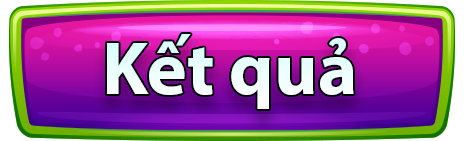
<style>
.page{position:relative;width:465px;height:141px}
.page>*{position:absolute;margin:0}
.t1{font:75px "MyriadPro-Bold";color:#ffffff}
</style>
<div class="page">
<p class="t1" style="left:107px;top:34px;width:247px;height:75px">Kết quả</p>
</div>
